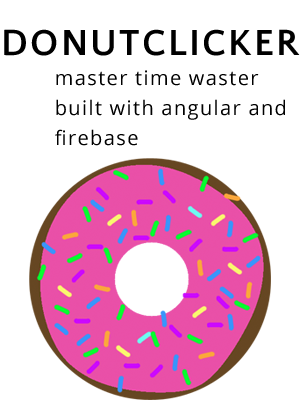
<style>
.page{position:relative;width:300px;height:400px;background:#ffffff}
.page>*{position:absolute;margin:0}
.t1{font:38px "QuattrocentoSans-Bold";letter-spacing:0.06em;color:#000000;text-transform:uppercase}
.t2{font:20px/30px "OpenSans";letter-spacing:0.06em;color:#000000}
</style>
<div class="page">
<p class="t1" style="left:4px;top:29px;width:296px;height:27px">donutclicker</p>
<p class="t2" style="left:55px;top:70px;width:230px;height:76px">master time waster built with angular and firebase</p>
</div>
